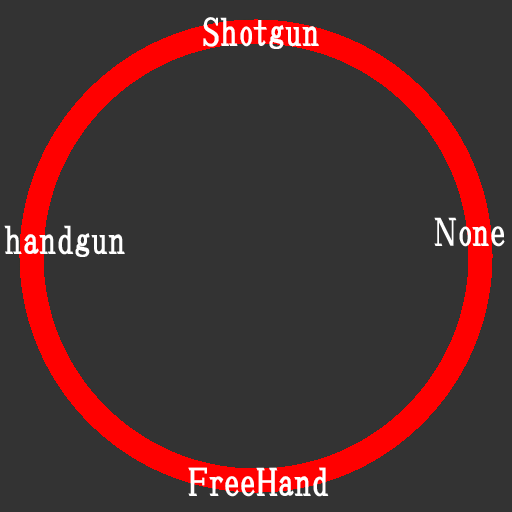
<style>
.page{position:relative;width:512px;height:512px;background:#333333}
.page>*{position:absolute;margin:0}
.t1{font:36px "HGPSoeiPresenceEB";letter-spacing:0.005em;color:#ffffff}
</style>
<div class="page">
<p class="t1" style="left:203px;top:17px;width:116px;height:32px">Shotgun</p>
<p class="t1" style="left:434px;top:217px;width:71px;height:30px">None</p>
<p class="t1" style="left:4px;top:225px;width:121px;height:32px">handgun</p>
<p class="t1" style="left:188px;top:467px;width:141px;height:30px">FreeHand</p>
</div>
